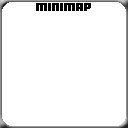
<style>
.page{position:relative;width:128px;height:128px;background:#ffffff}
.page>*{position:absolute;margin:0}
.t1{font:12px "RobotRadicals";color:#000000}
</style>
<div class="page">
<p class="t1" style="left:36px;top:3px;width:55px;height:8px">MiniMap</p>
</div>
